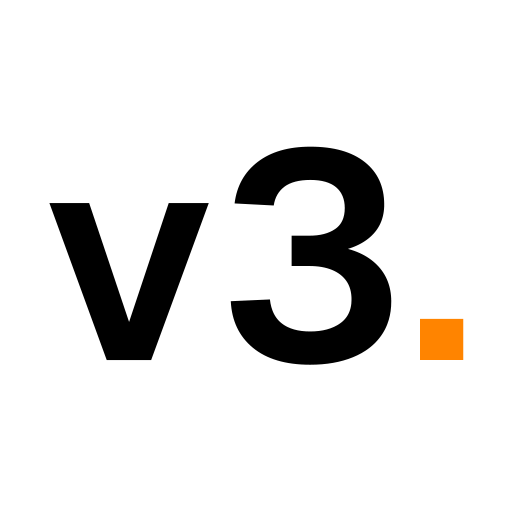
<style>
.page{position:relative;width:512px;height:512px;background:#ffffff}
.page>*{position:absolute;margin:0}
.t1{font:293.8px "Geist-SemiBold";letter-spacing:0.01em;color:#000000}
.t2{font:293.8px "Geist-SemiBold";letter-spacing:0.01em;color:#ff8400}
</style>
<div class="page">
<p class="t1" style="left:49px;top:146px;width:415px;height:219px">v3<span class="t2">.</span></p>
</div>
